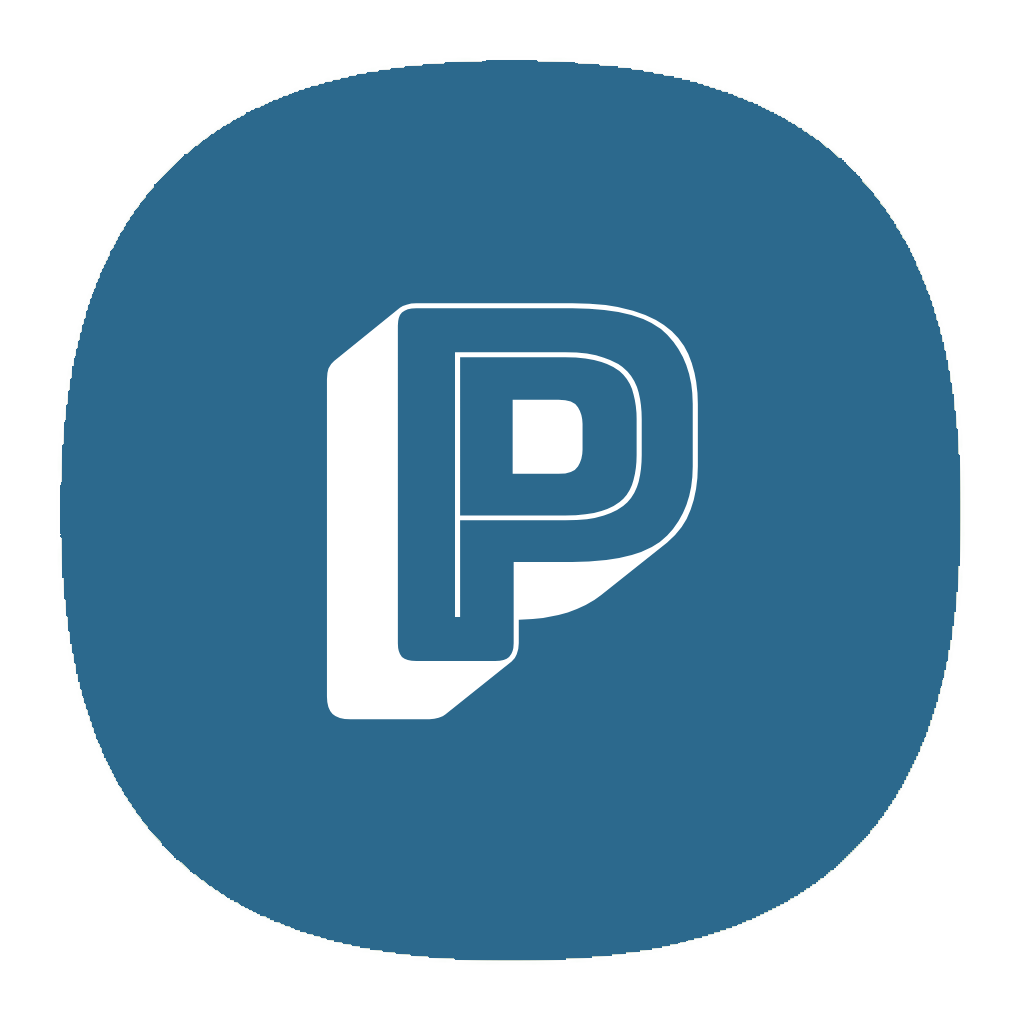
<style>
.page{position:relative;width:1024px;height:1024px;background:#2c698d}
.page>*{position:absolute;margin:0}
.t1{font:490px "BungeeShade-Regular";color:#ffffff;scale:1.04 1}
</style>
<div class="page">
<p class="t1" style="left:326px;top:303px;width:372px;height:417px">P</p>
</div>
